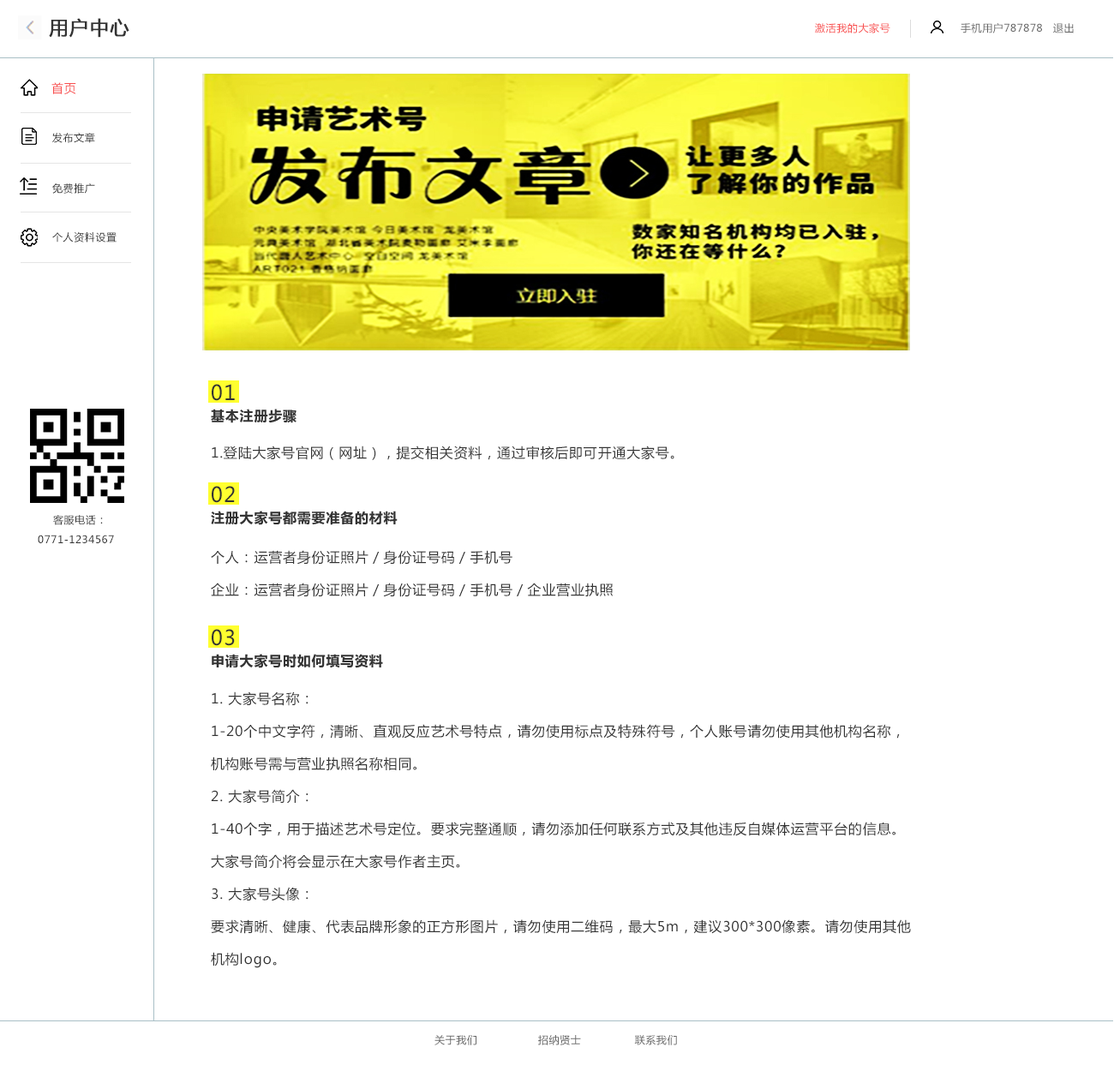
<style>
.page{position:relative;width:1114px;height:1071px;background:#ffffff}
.page>*{position:absolute;margin:0}
.t1{font:18.8px "MicrosoftYaHei";letter-spacing:0.05em;color:#333333;font-weight:bold}
.t2{font:10.3px "MicrosoftYaHei";letter-spacing:0.05em;color:#f84e4e}
.t3{font:10.3px "MicrosoftYaHei";letter-spacing:0.05em;color:#666666}
.t4{font:12px "MicrosoftYaHei";letter-spacing:0.05em;color:#f84e4e}
.t5{font:10.3px "MicrosoftYaHei";letter-spacing:0.05em;color:#333333}
.t6{font:20.6px "MicrosoftYaHei";letter-spacing:0.05em;color:#333333}
.t7{font:13.7px "MicrosoftYaHei-Bold";letter-spacing:0.05em;color:#333333}
.t8{font:13.7px "MicrosoftYaHei";letter-spacing:0.05em;color:#333333}
.t9{font:13.7px/15.4px "MicrosoftYaHei";letter-spacing:0.05em;color:#333333}
</style>
<div class="page">
<p class="t1" style="left:49px;top:18px;width:80px;height:20px">用户中心</p>
<p class="t2" style="left:815px;top:22px;width:75px;height:11px">激活我的大家号</p>
<p class="t3" style="left:960px;top:23px;width:82px;height:10px">手机用户787878</p>
<p class="t3" style="left:1053px;top:23px;width:20px;height:10px">退出</p>
<p class="t4" style="left:51px;top:82px;width:25px;height:12px">首页</p>
<p class="t5" style="left:52px;top:133px;width:43px;height:10px">发布文章</p>
<p class="t5" style="left:52px;top:183px;width:43px;height:11px">免费推广</p>
<p class="t5" style="left:52px;top:231px;width:65px;height:11px">个人资料设置</p>
<p class="t6" style="left:212px;top:384px;width:23px;height:17px">01</p>
<p class="t7" style="left:211px;top:409px;width:85px;height:14px">基本注册步骤</p>
<p class="t8" style="left:212px;top:445px;width:462px;height:15px">1.登陆大家号官网（网址），提交相关资料，通过审核后即可开通大家号。</p>
<p class="t6" style="left:212px;top:486px;width:23px;height:17px">02</p>
<p class="t5" style="left:53px;top:515px;width:50px;height:10px">客服电话：</p>
<p class="t7" style="left:211px;top:511px;width:186px;height:14px">注册大家号都需要准备的材料</p>
<p class="t5" style="left:38px;top:535px;width:76px;height:8px">0771-1234567</p>
<p class="t9" style="left:211px;top:550px;width:401px;height:47px">个人：运营者身份证照片／身份证号码／手机号<br>企业：运营者身份证照片／身份证号码／手机号／企业营业执照</p>
<p class="t6" style="left:212px;top:629px;width:23px;height:17px">03</p>
<p class="t7" style="left:212px;top:654px;width:171px;height:14px">申请大家号时如何填写资料</p>
<p class="t9" style="left:211px;top:691px;width:700px;height:277px">1. 大家号名称：<br>1-20个中文字符，清晰、直观反应艺术号特点，请勿使用标点及特殊符号，个人账号请勿使用其他机构名称，<br>机构账号需与营业执照名称相同。<br>2. 大家号简介：<br>1-40个字，用于描述艺术号定位。要求完整通顺，请勿添加任何联系方式及其他违反自媒体运营平台的信息。<br>大家号简介将会显示在大家号作者主页。<br>3. 大家号头像：<br>要求清晰、健康、代表品牌形象的正方形图片，请勿使用二维码，最大5m，建议300*300像素。请勿使用其他<br>机构logo。</p>
<p class="t3" style="left:434px;top:1035px;width:243px;height:10px">关于我们                 招纳贤士               联系我们</p>
</div>
